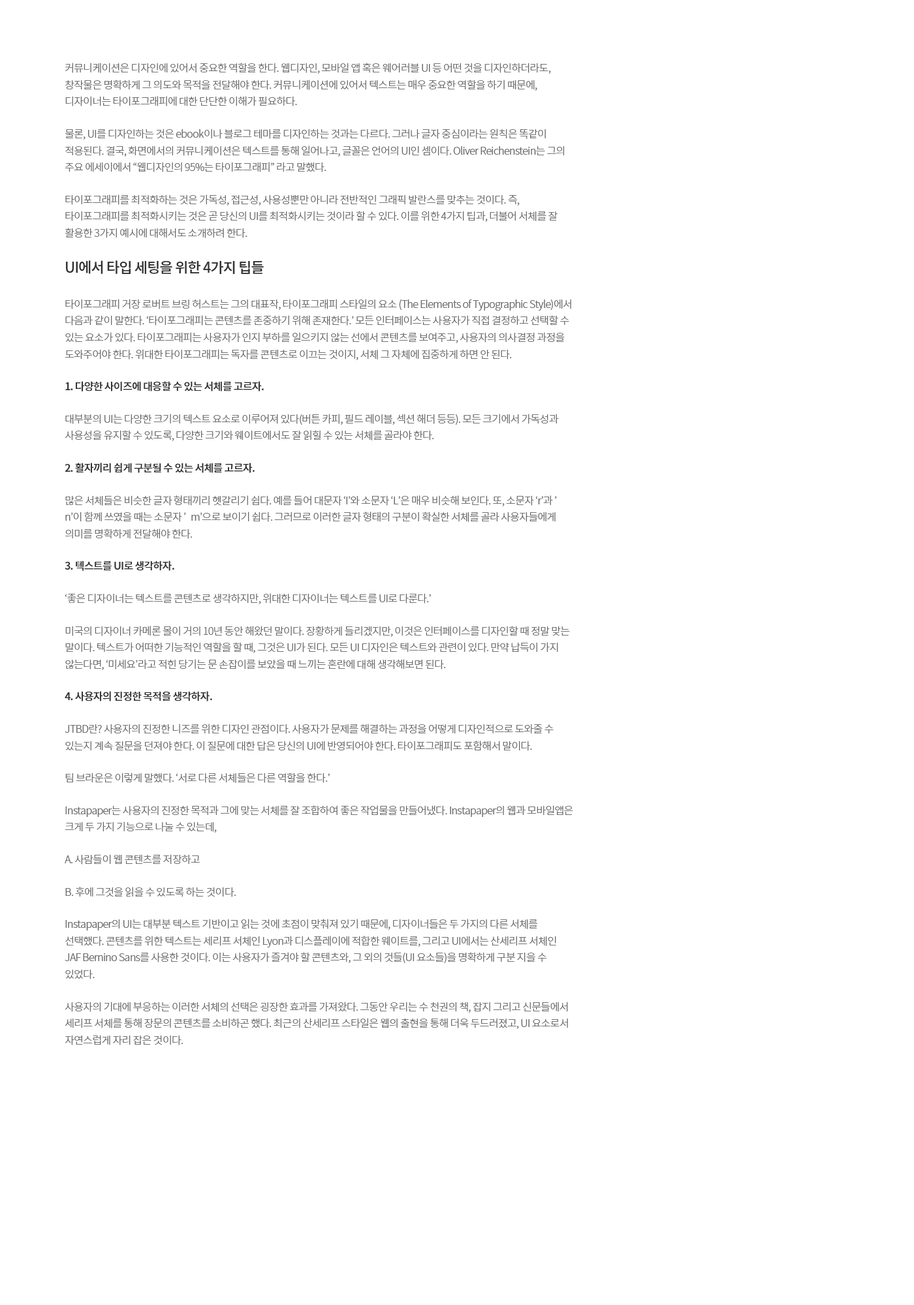
<style>
.page{position:relative;width:914px;height:1305px;background:#ffffff}
.page>*{position:absolute;margin:0}
.t1{font:10.4px "NotoSansCJKkr-Light";letter-spacing:-0.04em;color:#666666}
.t2{font:14.4px "NotoSansCJKkr-Medium";letter-spacing:-0.04em;color:#333333}
.t3{font:10.4px "NotoSansCJKkr-Medium";letter-spacing:-0.04em;color:#333333}
</style>
<div class="page">
<p class="t1" style="left:65px;top:63px;width:508px;height:982px">커뮤니케이션은 디자인에 있어서 중요한 역할을 한다. 웹디자인, 모바일 앱 혹은 웨어러블 UI 등 어떤 것을 디자인하더라도, 창작물은 명확하게 그 의도와 목적을 전달해야 한다. 커뮤니케이션에 있어서 텍스트는 매우 중요한 역할을 하기 때문에, 디자이너는 타이포그래피에 대한 단단한 이해가 필요하다.<br>물론, UI를 디자인하는 것은 ebook이나 블로그 테마를 디자인하는 것과는 다르다. 그러나 글자 중심이라는 원칙은 똑같이 적용된다. 결국, 화면에서의 커뮤니케이션은 텍스트를 통해 일어나고, 글꼴은 언어의 UI인 셈이다. Oliver Reichenstein는 그의 주요 에세이에서 “웹디자인의 95%는 타이포그래피” 라고 말했다.<br>타이포그래피를 최적화하는 것은 가독성, 접근성, 사용성뿐만 아니라 전반적인 그래픽 발란스를 맞추는 것이다. 즉, 타이포그래피를 최적화시키는 것은 곧 당신의 UI를 최적화시키는 것이라 할 수 있다. 이를 위한 4가지 팁과, 더불어 서체를 잘 활용한 3가지 예시에 대해서도 소개하려 한다.<br><span class="t2">UI에서 타입 세팅을 위한 4가지 팁들<br></span>타이포그래피 거장 로버트 브링 허스트는 그의 대표작, 타이포그래피 스타일의 요소 (The Elements of Typographic Style)에서 다음과 같이 말한다. ‘타이포그래피는 콘텐츠를 존중하기 위해 존재한다.’ 모든 인터페이스는 사용자가 직접 결정하고 선택할 수 있는 요소가 있다. 타이포그래피는 사용자가 인지 부하를 일으키지 않는 선에서 콘텐츠를 보여주고, 사용자의 의사결정 과정을 도와주어야 한다. 위대한 타이포그래피는 독자를 콘텐츠로 이끄는 것이지, 서체 그 자체에 집중하게 하면 안 된다.<br><span class="t3">1. 다양한 사이즈에 대응할 수 있는 서체를 고르자.<br></span>대부분의 UI는 다양한 크기의 텍스트 요소로 이루어져 있다(버튼 카피, 필드 레이블, 섹션 해더 등등). 모든 크기에서 가독성과 사용성을 유지할 수 있도록, 다양한 크기와 웨이트에서도 잘 읽힐 수 있는 서체를 골라야 한다.<br><span class="t3">2. 활자끼리 쉽게 구분될 수 있는 서체를 고르자.<br></span>많은 서체들은 비슷한 글자 형태끼리 헷갈리기 쉽다. 예를 들어 대문자 ‘I’와 소문자 ‘L’은 매우 비슷해 보인다. 또, 소문자 ‘r’과 ’n’이 함께 쓰였을 때는 소문자 ’m’으로 보이기 쉽다. 그러므로 이러한 글자 형태의 구분이 확실한 서체를 골라 사용자들에게 의미를 명확하게 전달해야 한다.<br><span class="t3">3. 텍스트를 UI로 생각하자.<br></span>‘좋은 디자이너는 텍스트를 콘텐츠로 생각하지만, 위대한 디자이너는 텍스트를 UI로 다룬다.’<br>미국의 디자이너 카메론 몰이 거의 10년 동안 해왔던 말이다. 장황하게 들리겠지만, 이것은 인터페이스를 디자인할 때 정말 맞는 말이다. 텍스트가 어떠한 기능적인 역할을 할 때, 그것은 UI가 된다. 모든 UI 디자인은 텍스트와 관련이 있다. 만약 납득이 가지 않는다면, ‘미세요’라고 적힌 당기는 문 손잡이를 보았을 때 느끼는 혼란에 대해 생각해보면 된다.<br><span class="t3">4. 사용자의 진정한 목적을 생각하자.<br></span>JTBD란? 사용자의 진정한 니즈를 위한 디자인 관점이다. 사용자가 문제를 해결하는 과정을 어떻게 디자인적으로 도와줄 수 있는지 계속 질문을 던져야 한다. 이 질문에 대한 답은 당신의 UI에 반영되어야 한다. 타이포그래피도 포함해서 말이다.<br>팀 브라운은 이렇게 말했다. ‘서로 다른 서체들은 다른 역할을 한다.’<br>Instapaper는 사용자의 진정한 목적과 그에 맞는 서체를 잘 조합하여 좋은 작업물을 만들어냈다. Instapaper의 웹과 모바일앱은 크게 두 가지 기능으로 나눌 수 있는데,<br>A. 사람들이 웹 콘텐츠를 저장하고<br>B. 후에 그것을 읽을 수 있도록 하는 것이다.<br>Instapaper의 UI는 대부분 텍스트 기반이고 읽는 것에 초점이 맞춰져 있기 때문에, 디자이너들은 두 가지의 다른 서체를 선택했다. 콘텐츠를 위한 텍스트는 세리프 서체인 Lyon과 디스플레이에 적합한 웨이트를, 그리고 UI에서는 산세리프 서체인 JAF Bernino Sans를 사용한 것이다. 이는 사용자가 즐겨야 할 콘텐츠와, 그 외의 것들(UI 요소들)을 명확하게 구분 지을 수 있었다.<br>사용자의 기대에 부응하는 이러한 서체의 선택은 굉장한 효과를 가져왔다. 그동안 우리는 수 천권의 책, 잡지 그리고 신문들에서 세리프 서체를 통해 장문의 콘텐츠를 소비하곤 했다. 최근의 산세리프 스타일은 웹의 출현을 통해 더욱 두드러졌고, UI 요소로서 자연스럽게 자리 잡은 것이다.</p>
</div>
